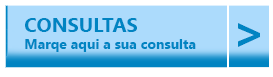
<style>
.page{position:relative;width:273px;height:77px;background:#acdbfc}
.page>*{position:absolute;margin:0}
.t1{font:14px "SegoeUI-Bold";color:#0084c2}
.t2{font:20px "SegoeUI-Bold";color:#0084c2}
.t3{font:48px "SegoeUI-Bold";color:#0084c2}
</style>
<div class="page">
<p class="t1" style="left:25px;top:18px;width:171px;height:34px"><span class="t2">CONSULTAS<br></span>Marqe aqui a sua consulta</p>
<p class="t3" style="left:238px;top:23px;width:22px;height:24px">&gt;</p>
</div>
